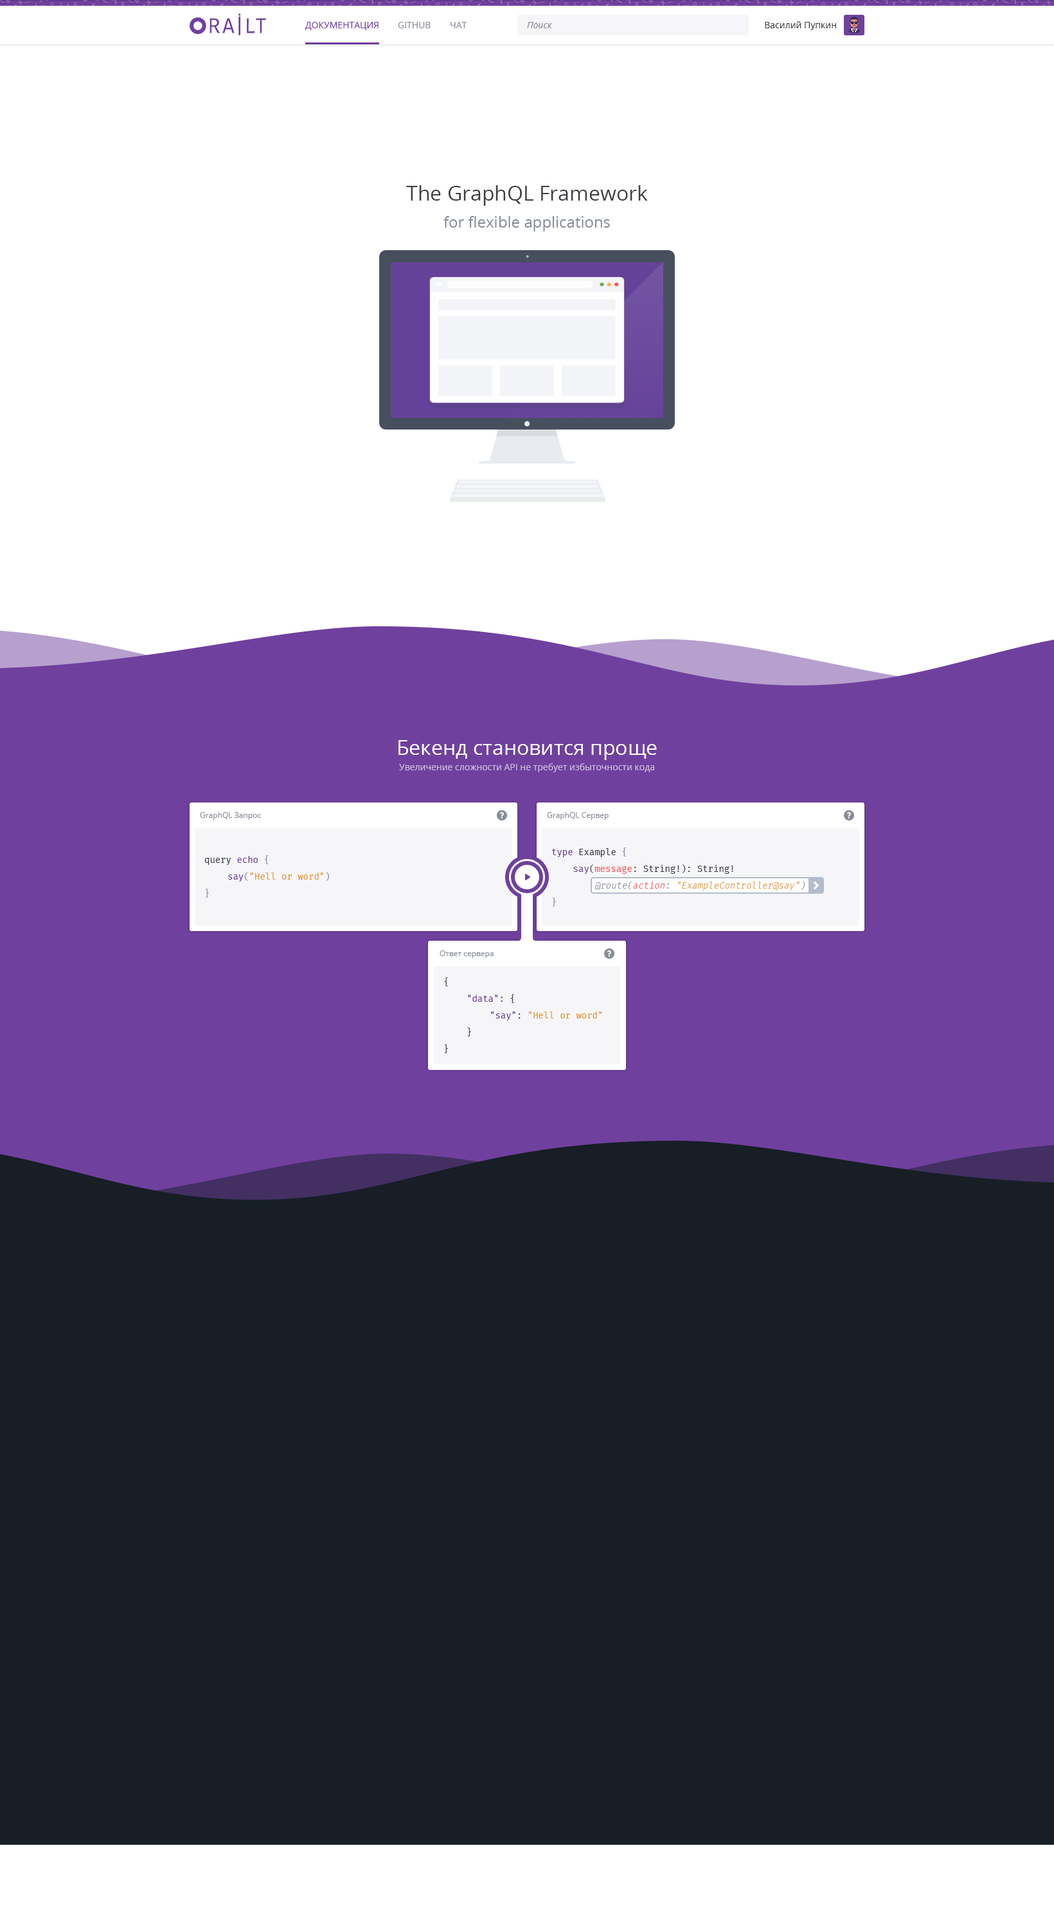
<style>
.page{position:relative;width:1054px;height:1929px;background:#171e26}
.page>*{position:absolute;margin:0}
.t1{font:9px "OpenSans";color:#70409e}
.t2{font:9px "OpenSans";color:#878d99}
.t3{font:9px "OpenSans-Italic";color:#878d99}
.t4{font:9px "OpenSans";color:#3c3e42}
.t5{font:15.4px/27px "OpenSans";color:#878d99}
.t6{font:20.6px/27px "OpenSans";color:#3c3e42}
.t7{font:20.6px "OpenSans";color:#ffffff}
.t8{font:9px "OpenSans";color:#cdbadf}
.t9{font:7.7px "OpenSans";color:#878d99}
.t10{font:9px/16.7px "FiraCode-Regular";color:#e29735}
.t11{font:9px/16.7px "FiraCode-Regular";color:#3c3e42}
.t12{font:9px/16.7px "FiraCode-Regular";color:#70409e}
.t13{font:9px/16.7px "FiraCode-Regular";color:#878d99}
.t14{font:9px/16.7px "FiraCode-Light";color:#e29735;font-style:italic}
.t15{font:9px/16.7px "FiraCode-Regular";color:#fa5555}
.t16{font:9px/16.7px "FiraCode-Light";color:#878d99;font-style:italic}
.t17{font:9px/16.7px "FiraCode-Light";color:#fa5555;font-style:italic}
</style>
<div class="page">
<p class="t1" style="left:305px;top:22px;width:74px;height:8px">ДОКУМЕНТАЦИЯ</p>
<p class="t2" style="left:398px;top:22px;width:33px;height:6px">GITHUB</p>
<p class="t2" style="left:451px;top:22px;width:16px;height:6px">ЧАТ</p>
<p class="t3" style="left:527px;top:22px;width:26px;height:6px">Поиск</p>
<p class="t4" style="left:765px;top:21px;width:71px;height:9px">Василий Пупкин</p>
<p class="t5" style="left:406px;top:185px;width:242px;height:46px;text-align:center"><span class="t6">The GraphQL Framework<br></span>for flexible applications</p>
<p class="t7" style="left:399px;top:740px;width:258px;height:20px">Бекенд становится проще</p>
<p class="t8" style="left:399px;top:763px;width:255px;height:9px">Увеличение сложности API не требует избыточности кода</p>
<p class="t9" style="left:200px;top:812px;width:61px;height:8px">GraphQL Запрос</p>
<p class="t9" style="left:547px;top:812px;width:62px;height:8px">GraphQL Сервер</p>
<p class="t10" style="left:204px;top:855px;width:126px;height:42px"><span class="t11">query </span><span class="t12">echo</span><span class="t13"> {<br> </span><span class="t12">say</span><span class="t13">(</span>"Hell or word"<span class="t13">)<br>}</span></p>
<p class="t14" style="left:552px;top:847px;width:254px;height:59px"><span class="t12">type</span><span class="t11"> Example </span><span class="t13">{<br>    </span><span class="t12">say</span><span class="t11">(</span><span class="t15">message</span><span class="t11">: String!): String!<br>        </span><span class="t16">@route(</span><span class="t17">action</span><span class="t16">: </span>"ExampleController@say"<span class="t16">)<br></span><span class="t13">}</span></p>
<p class="t9" style="left:440px;top:950px;width:54px;height:8px">Ответ сервера</p>
<p class="t10" style="left:444px;top:977px;width:158px;height:76px"><span class="t11">{<br> </span><span class="t12">"data"</span><span class="t11">: {<br>  </span><span class="t12">"say"</span><span class="t11">: </span>"Hell or word"<br><span class="t11"> }<br>}</span></p>
</div>
